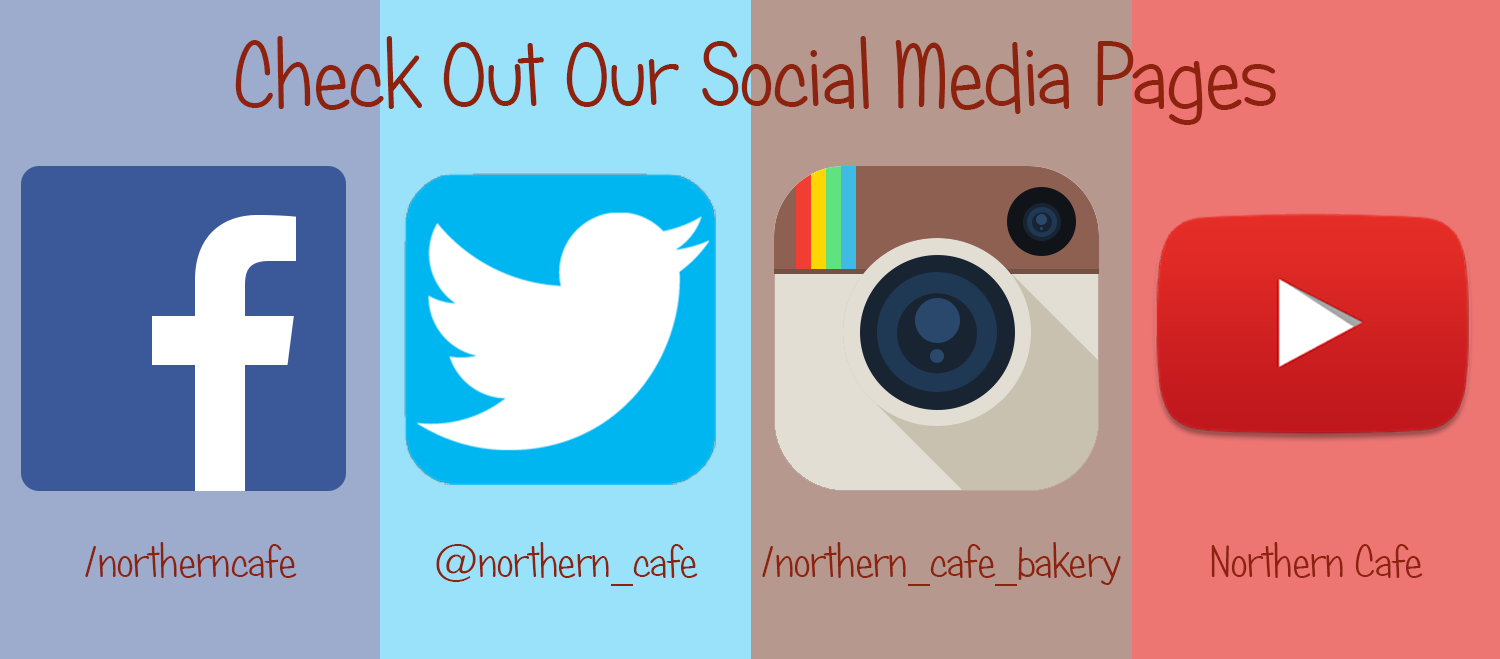
<style>
.page{position:relative;width:1500px;height:659px}
.page>*{position:absolute;margin:0}
.t1{font:90px "CandyRoundBTN";color:#8d230f}
.t2{font:44px "CandyRoundBTN";color:#8d230f}
</style>
<div class="page">
<p class="t1" style="left:235px;top:36px;width:1041px;height:89px">Check Out Our Social Media Pages</p>
<p class="t2" style="left:85px;top:542px;width:212px;height:36px">/northerncafe</p>
<p class="t2" style="left:436px;top:542px;width:262px;height:44px">@northern_cafe</p>
<p class="t2" style="left:762px;top:542px;width:359px;height:44px">/northern_cafe_bakery</p>
<p class="t2" style="left:1211px;top:542px;width:212px;height:36px">Northern Cafe</p>
</div>
